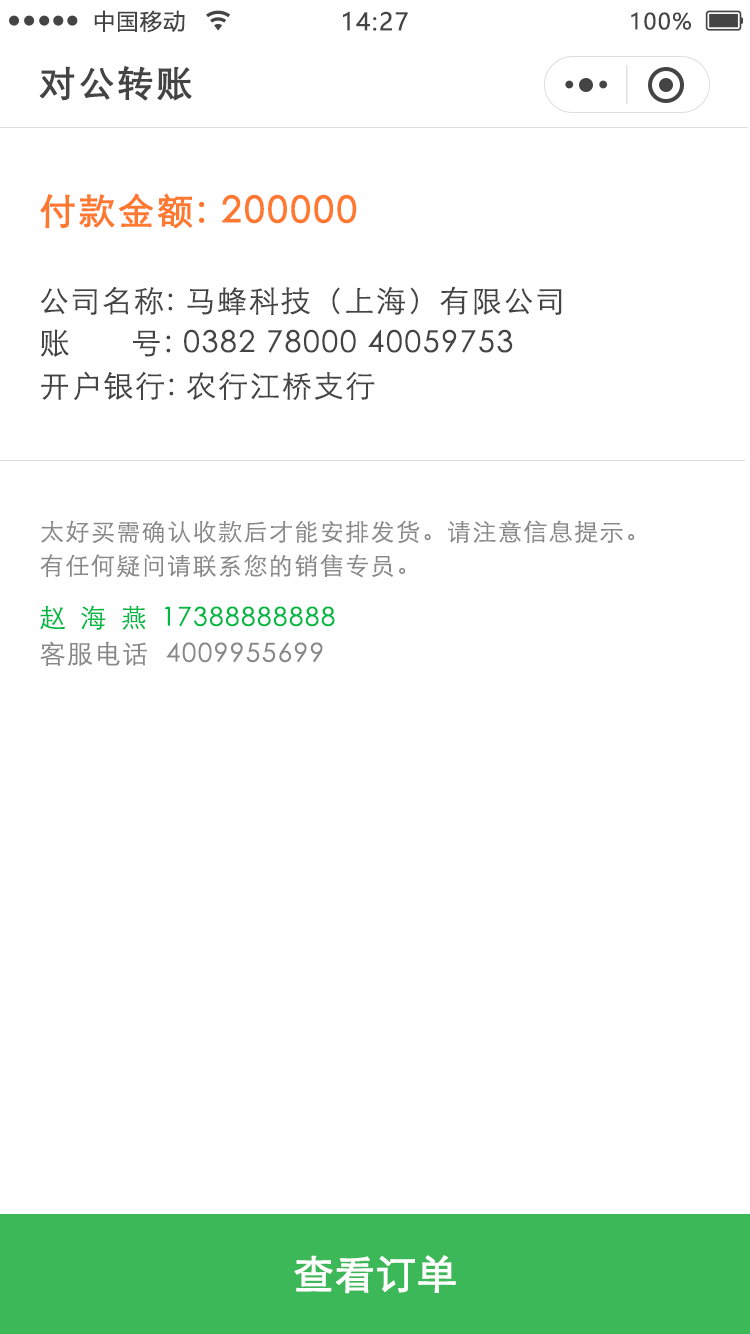
<style>
.page{position:relative;width:750px;height:1334px;background:#ffffff}
.page>*{position:absolute;margin:0}
.t1{font:22px "MicrosoftYaHei";letter-spacing:0.06em;color:#444444}
.t2{font:24px "MicrosoftYaHei";letter-spacing:0.06em;color:#444444}
.t3{font:36px "STXihei";letter-spacing:0.06em;color:#444444;font-weight:bold}
.t4{font:36px "STXihei";letter-spacing:0.06em;color:#ff782f;font-weight:bold}
.t5{font:30px "STXihei";letter-spacing:0.06em;color:#444444}
.t6{font:30px "STXihei";letter-spacing:0.08em;color:#444444}
.t7{font:24px "STXihei";letter-spacing:0.06em;color:#888888}
.t8{font:26px "STXihei";letter-spacing:0.06em;color:#00b945}
.t9{font:26px "STXihei";letter-spacing:0.56em;color:#00b945}
.t10{font:26px "STXihei";letter-spacing:0.06em;color:#888888}
.t11{font:40px "STXihei";color:#ffffff;font-weight:bold}
</style>
<div class="page">
<p class="t1" style="left:94px;top:10px;width:91px;height:23px">中国移动</p>
<p class="t2" style="left:343px;top:11px;width:65px;height:20px">14:27</p>
<p class="t1" style="left:631px;top:12px;width:60px;height:18px">100%</p>
<p class="t3" style="left:39px;top:66px;width:153px;height:35px">对公转账</p>
<p class="t4" style="left:40px;top:193px;width:317px;height:36px">付款金额: 200000</p>
<p class="t5" style="left:40px;top:286px;width:522px;height:29px">公司名称: 马蜂科技（上海）有限公司</p>
<p class="t5" style="left:40px;top:329px;width:473px;height:28px"><span class="t6">账      号</span>: 0382 78000 40059753</p>
<p class="t5" style="left:41px;top:371px;width:334px;height:29px">开户银行: 农行江桥支行</p>
<p class="t7" style="left:41px;top:520px;width:594px;height:24px">太好买需确认收款后才能安排发货。请注意信息提示。</p>
<p class="t7" style="left:40px;top:554px;width:366px;height:24px">有任何疑问请联系您的销售专员。</p>
<p class="t8" style="left:40px;top:605px;width:295px;height:25px"><span class="t9">赵海燕</span>17388888888</p>
<p class="t10" style="left:40px;top:641px;width:283px;height:25px">客服电话  4009955699</p>
<p class="t11" style="left:294px;top:1255px;width:162px;height:39px">查看订单</p>
</div>
